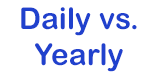
<style>
.page{position:relative;width:160px;height:75px;background:#ffffff}
.page>*{position:absolute;margin:0}
.t1{font:30px "ArialRoundedMTBold";color:#2041cd}
</style>
<div class="page">
<p class="t1" style="left:21px;top:7px;width:116px;height:65px;text-align:center">Daily vs.<br>Yearly</p>
</div>
